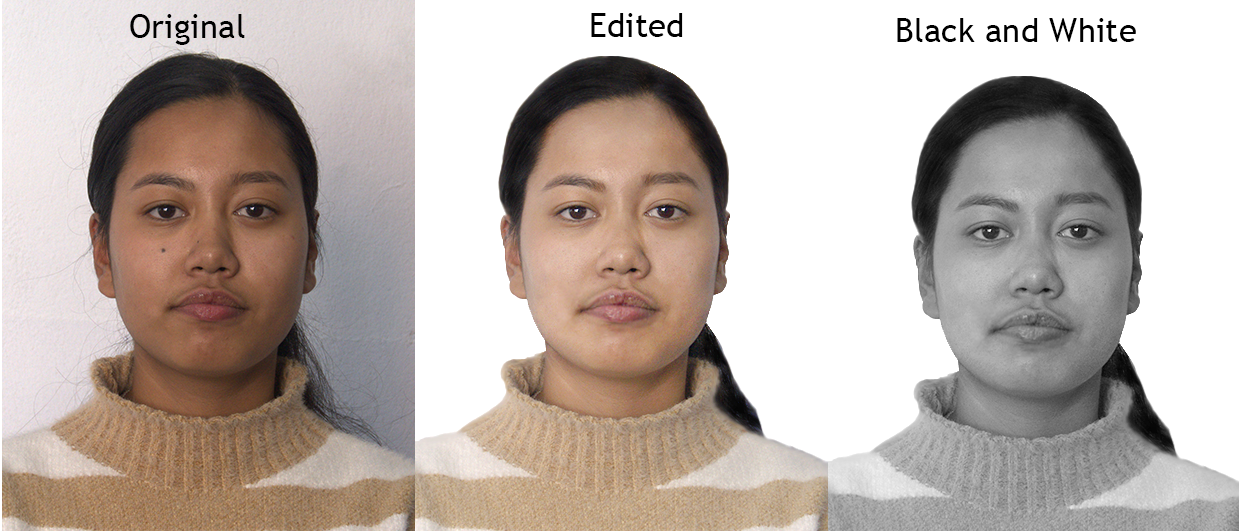
<style>
.page{position:relative;width:1239px;height:531px;background:#ffffff}
.page>*{position:absolute;margin:0}
.t1{font:33.3px "TrebuchetMS";color:#000000}
</style>
<div class="page">
<p class="t1" style="left:130px;top:14px;width:115px;height:31px">Original</p>
<p class="t1" style="left:591px;top:13px;width:92px;height:24px">Edited</p>
<p class="t1" style="left:897px;top:18px;width:239px;height:24px">Black and White</p>
</div>
